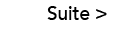
<style>
.page{position:relative;width:140px;height:30px;background:#ffffff}
.page>*{position:absolute;margin:0}
.t1{font:20px "Avenir-Medium";color:#000000;scale:0.94 1}
</style>
<div class="page">
<p class="t1" style="left:47px;top:6px;width:60px;height:14px">Suite &gt;</p>
</div>
